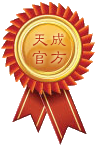
<style>
.page{position:relative;width:97px;height:147px;background:#ffffff}
.page>*{position:absolute;margin:0}
.t1{font:18px/18px "HYf2gj";letter-spacing:0.05em;color:#b62d0e}
</style>
<div class="page">
<p class="t1" style="left:32px;top:33px;width:35px;height:31px">天成<br>官方</p>
</div>
